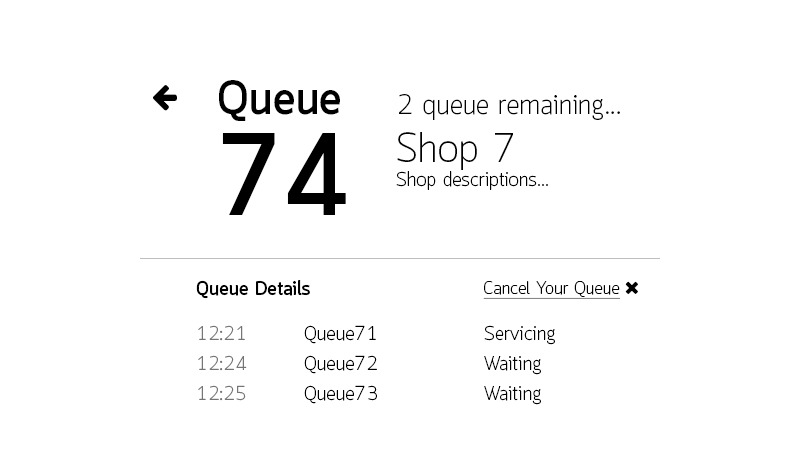
<style>
.page{position:relative;width:800px;height:450px;background:#ffffff}
.page>*{position:absolute;margin:0}
.t1{font:47.5px "Quark-Bold";letter-spacing:0.011em;color:#000000}
.t2{font:28px "Quark-Light";letter-spacing:0.011em;color:#000000}
.t3{font:115.3px "Quark-Bold";color:#000000}
.t4{font:20px "Quark-Light";letter-spacing:0.011em;color:#000000}
.t5{font:41px/45px "Quark-Light";letter-spacing:0.011em;color:#000000}
.t6{font:20px/45px "Quark-Light";letter-spacing:0.011em;color:#000000}
.t7{font:20px/45px "Quark-Bold";letter-spacing:0.011em;color:#000000}
.t8{font:20px/45px "Quark-Light";letter-spacing:0.011em;color:#757575}
.t9{font:20px/30px "Quark-Light";letter-spacing:0.011em;color:#000000}
.t10{font:20px/30px "Quark-Light";letter-spacing:0.011em;color:#757575}
</style>
<div class="page">
<p class="t1" style="left:219px;top:80px;width:121px;height:41px">Queue</p>
<p class="t2" style="left:399px;top:94px;width:221px;height:26px">2 queue remaining...</p>
<p class="t3" style="left:222px;top:133px;width:124px;height:82px">74</p>
<p class="t4" style="left:396px;top:132px;width:152px;height:58px"><span class="t5">Shop 7<br></span>Shop descriptions...</p>
<p class="t6" style="left:196px;top:280px;width:359px;height:125px"><span class="t7">Queue Details<br></span><span class="t8">12:21</span>  Queue71    Servici<span class="t9">ng<br></span><span class="t10">12:24</span><span class="t9">  Queue72   Waiting<br></span><span class="t10">12:25</span><span class="t9">  Queue73   Waiting</span></p>
</div>
